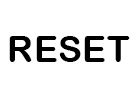
<style>
.page{position:relative;width:140px;height:100px;background:#ffffff}
.page>*{position:absolute;margin:0}
.t1{font:36px "ArialRoundedMTBold";letter-spacing:0.01em;color:#000000}
</style>
<div class="page">
<p class="t1" style="left:9px;top:36px;width:121px;height:26px">RESET</p>
</div>
